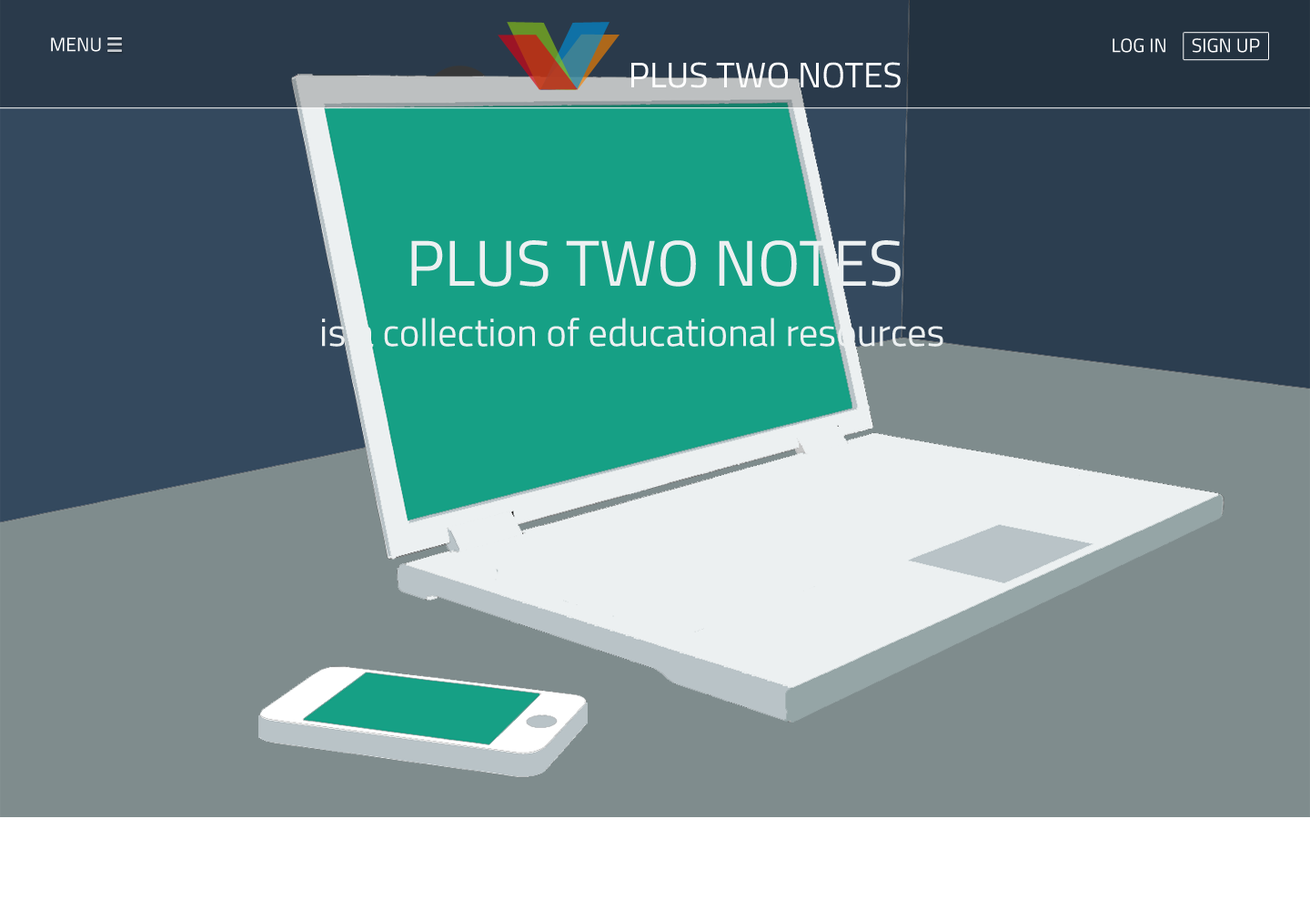
<style>
.page{position:relative;width:1310px;height:910px;background:#7f8c8d}
.page>*{position:absolute;margin:0}
.t1{font:19.4px "TitilliumWeb-Regular";color:#ffffff}
.t2{font:35.6px "TitilliumWeb-Regular";color:#ffffff}
.t3{font:64.7px "TitilliumWeb-Regular";color:#ecf0f1}
.t4{font:38.8px "TitilliumWeb-Regular";color:#ecf0f1}
</style>
<div class="page">
<p class="t1" style="left:51px;top:37px;width:50px;height:15px">MENU</p>
<p class="t1" style="left:1113px;top:38px;width:53px;height:15px">LOG IN</p>
<p class="t1" style="left:1192px;top:38px;width:68px;height:15px">SIGN UP</p>
<p class="t2" style="left:632px;top:62px;width:269px;height:26px">PLUS TWO NOTES</p>
<p class="t3" style="left:411px;top:240px;width:490px;height:47px">PLUS TWO NOTES</p>
<p class="t4" style="left:322px;top:318px;width:622px;height:29px">is a collection of educational resources</p>
</div>
